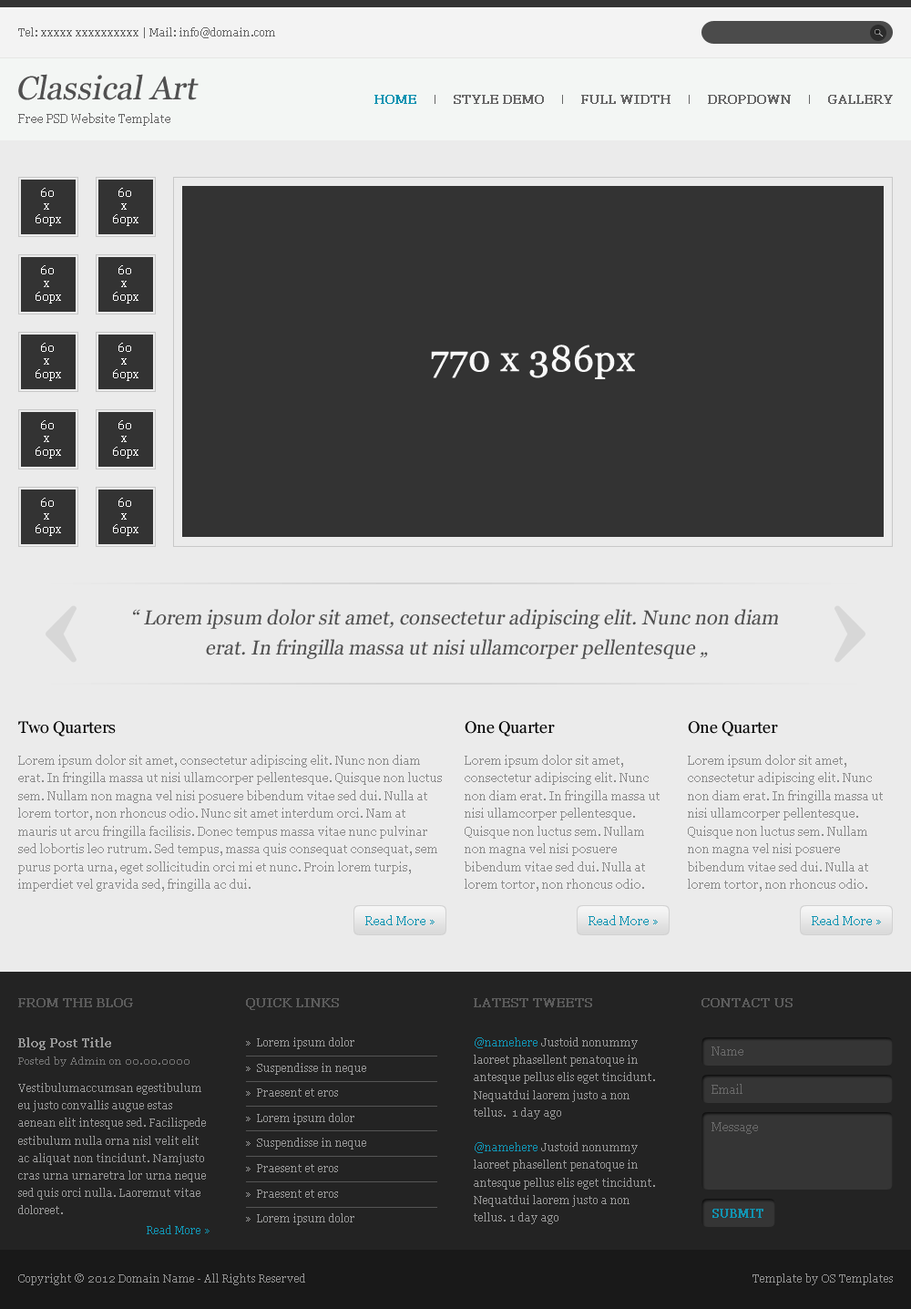
<style>
.page{position:relative;width:911px;height:1309px;background:#ebebeb}
.page>*{position:absolute;margin:0}
.t1{font:10.9px "Georgia";color:#666666}
.t2{font:32.8px "Georgia";color:#505050;font-style:italic}
.t3{font:12.8px "Georgia";color:#1194b2;font-weight:bold}
.t4{font:12.8px "Georgia";color:#666666;font-weight:bold}
.t5{font:11.8px "Georgia";color:#666666}
.t6{font:10.9px/13.1px "Georgia";color:#ffffff}
.t7{font:36.4px "Georgia";color:#f8f8f8;font-weight:bold}
.t8{font:20px/30.1px "Georgia";color:#505050;font-style:italic}
.t9{font:20px/20px "Georgia";color:#505050;font-style:italic}
.t10{font:16.4px "Georgia";color:#000000}
.t11{font:11.8px/17.8px "Georgia";color:#8b8b8b}
.t12{font:11.8px "Georgia";color:#1194b2}
.t13{font:12.8px "Georgia";color:#5c5c5c;font-weight:bold}
.t14{font:11.8px "Georgia";color:#989898;font-weight:bold}
.t15{font:10.9px/25.2px "Georgia";color:#989898}
.t16{font:10.9px/17.5px "Georgia";color:#989898}
.t17{font:10.9px/17.5px "Georgia";color:#1193b2}
.t18{font:11.8px "Georgia";color:#696969}
.t19{font:10px "Georgia";color:#757575}
.t20{font:11.8px "Georgia";color:#1194b2;font-weight:bold}
.t21{font:10.9px "Georgia";color:#1194b2}
.t22{font:10.9px "Georgia";color:#919191}
</style>
<div class="page">
<p class="t1" style="left:18px;top:27px;width:257px;height:11px">Tel: xxxxx xxxxxxxxxx | Mail: info@domain.com</p>
<p class="t2" style="left:18px;top:74px;width:181px;height:26px">Classical Art</p>
<p class="t3" style="left:375px;top:95px;width:41px;height:9px">HOME</p>
<p class="t4" style="left:454px;top:95px;width:90px;height:9px">STYLE DEMO</p>
<p class="t4" style="left:581px;top:95px;width:90px;height:9px">FULL WIDTH</p>
<p class="t4" style="left:708px;top:95px;width:83px;height:9px">DROPDOWN</p>
<p class="t4" style="left:828px;top:95px;width:65px;height:9px">GALLERY</p>
<p class="t5" style="left:18px;top:113px;width:152px;height:13px">Free PSD Website Template</p>
<p class="t6" style="left:36px;top:188px;width:25px;height:38px;text-align:center">60 <br>x <br>60px</p>
<p class="t6" style="left:113px;top:188px;width:26px;height:38px;text-align:center">60 <br>x <br>60px</p>
<p class="t6" style="left:36px;top:265px;width:25px;height:38px;text-align:center">60 <br>x <br>60px</p>
<p class="t6" style="left:113px;top:265px;width:26px;height:38px;text-align:center">60 <br>x <br>60px</p>
<p class="t6" style="left:36px;top:343px;width:25px;height:38px;text-align:center">60 <br>x <br>60px</p>
<p class="t6" style="left:113px;top:343px;width:26px;height:38px;text-align:center">60 <br>x <br>60px</p>
<p class="t7" style="left:431px;top:344px;width:204px;height:35px">770 x 386px</p>
<p class="t6" style="left:36px;top:420px;width:25px;height:38px;text-align:center">60 <br>x <br>60px</p>
<p class="t6" style="left:113px;top:420px;width:26px;height:38px;text-align:center">60 <br>x <br>60px</p>
<p class="t6" style="left:36px;top:498px;width:25px;height:38px;text-align:center">60 <br>x <br>60px</p>
<p class="t6" style="left:113px;top:498px;width:26px;height:38px;text-align:center">60 <br>x <br>60px</p>
<p class="t8" style="left:133px;top:609px;width:645px;height:50px;text-align:center"><span class="t9">“</span> Lorem ipsum dolor sit amet, consectetur adipiscing elit. Nunc non diam <br>erat. In fringilla massa ut nisi ullamcorper pellentesque „</p>
<p class="t10" style="left:18px;top:721px;width:98px;height:15px">Two Quarters</p>
<p class="t10" style="left:465px;top:721px;width:90px;height:15px">One Quarter</p>
<p class="t10" style="left:688px;top:721px;width:90px;height:15px">One Quarter</p>
<p class="t11" style="left:18px;top:755px;width:424px;height:136px">Lorem ipsum dolor sit amet, consectetur adipiscing elit. Nunc non diam erat. In fringilla massa ut nisi ullamcorper pellentesque. Quisque non luctus sem. Nullam non magna vel nisi posuere bibendum vitae sed dui. Nulla at lorem tortor, non rhoncus odio. Nunc sit amet interdum orci. Nam at mauris ut arcu fringilla facilisis. Donec tempus massa vitae nunc pulvinar sed lobortis leo rutrum. Sed tempus, massa quis consequat consequat, sem purus porta urna, eget sollicitudin orci mi et nunc. Proin lorem turpis, imperdiet vel gravida sed, fringilla ac dui.</p>
<p class="t11" style="left:465px;top:755px;width:195px;height:136px">Lorem ipsum dolor sit amet, consectetur adipiscing elit. Nunc non diam erat. In fringilla massa ut nisi ullamcorper pellentesque. Quisque non luctus sem. Nullam non magna vel nisi posuere bibendum vitae sed dui. Nulla at lorem tortor, non rhoncus odio.</p>
<p class="t11" style="left:688px;top:755px;width:195px;height:136px">Lorem ipsum dolor sit amet, consectetur adipiscing elit. Nunc non diam erat. In fringilla massa ut nisi ullamcorper pellentesque. Quisque non luctus sem. Nullam non magna vel nisi posuere bibendum vitae sed dui. Nulla at lorem tortor, non rhoncus odio.</p>
<p class="t12" style="left:365px;top:915px;width:70px;height:10px">Read More »</p>
<p class="t12" style="left:589px;top:915px;width:69px;height:10px">Read More »</p>
<p class="t12" style="left:812px;top:915px;width:69px;height:10px">Read More »</p>
<p class="t13" style="left:18px;top:998px;width:115px;height:9px">FROM THE BLOG</p>
<p class="t13" style="left:246px;top:998px;width:93px;height:12px">QUICK LINKS</p>
<p class="t13" style="left:474px;top:998px;width:118px;height:9px">LATEST TWEETS</p>
<p class="t13" style="left:702px;top:998px;width:91px;height:9px">CONTACT US</p>
<p class="t14" style="left:18px;top:1037px;width:93px;height:13px">Blog Post Title</p>
<p class="t15" style="left:246px;top:1037px;width:120px;height:188px">»  Lorem ipsum dolor<br>»  Suspendisse in neque<br>»  Praesent et eros<br>»  Lorem ipsum dolor<br>»  Suspendisse in neque<br>»  Praesent et eros<br>»  Praesent et eros<br>»  Lorem ipsum dolor</p>
<p class="t16" style="left:474px;top:1037px;width:181px;height:187px"><span class="t17">@namehere</span> Justoid nonummy laoreet phasellent penatoque in antesque pellus elis eget tincidunt. Nequatdui laorem justo a non tellus.  1 day ago<br><br><span class="t17">@namehere</span> Justoid nonummy laoreet phasellent penatoque in antesque pellus elis eget tincidunt. Nequatdui laorem justo a non tellus. 1 day ago</p>
<p class="t18" style="left:712px;top:1046px;width:32px;height:9px">Name</p>
<p class="t19" style="left:18px;top:1056px;width:172px;height:10px">Posted by Admin on 00.00.0000</p>
<p class="t16" style="left:18px;top:1083px;width:188px;height:131px">Vestibulumaccumsan egestibulum eu justo convallis augue estas aenean elit intesque sed. Facilispede estibulum nulla orna nisl velit elit ac aliquat non tincidunt. Namjusto cras urna urnaretra lor urna neque sed quis orci nulla. Laoremut vitae doloreet.</p>
<p class="t18" style="left:712px;top:1083px;width:31px;height:11px">Email</p>
<p class="t18" style="left:712px;top:1122px;width:46px;height:12px">Message</p>
<p class="t20" style="left:713px;top:1208px;width:51px;height:9px">SUBMIT</p>
<p class="t21" style="left:147px;top:1225px;width:63px;height:9px">Read More »</p>
<p class="t22" style="left:18px;top:1273px;width:287px;height:12px">Copyright © 2012 Domain Name - All Rights Reserved</p>
<p class="t22" style="left:753px;top:1273px;width:140px;height:12px">Template by OS Templates</p>
</div>
